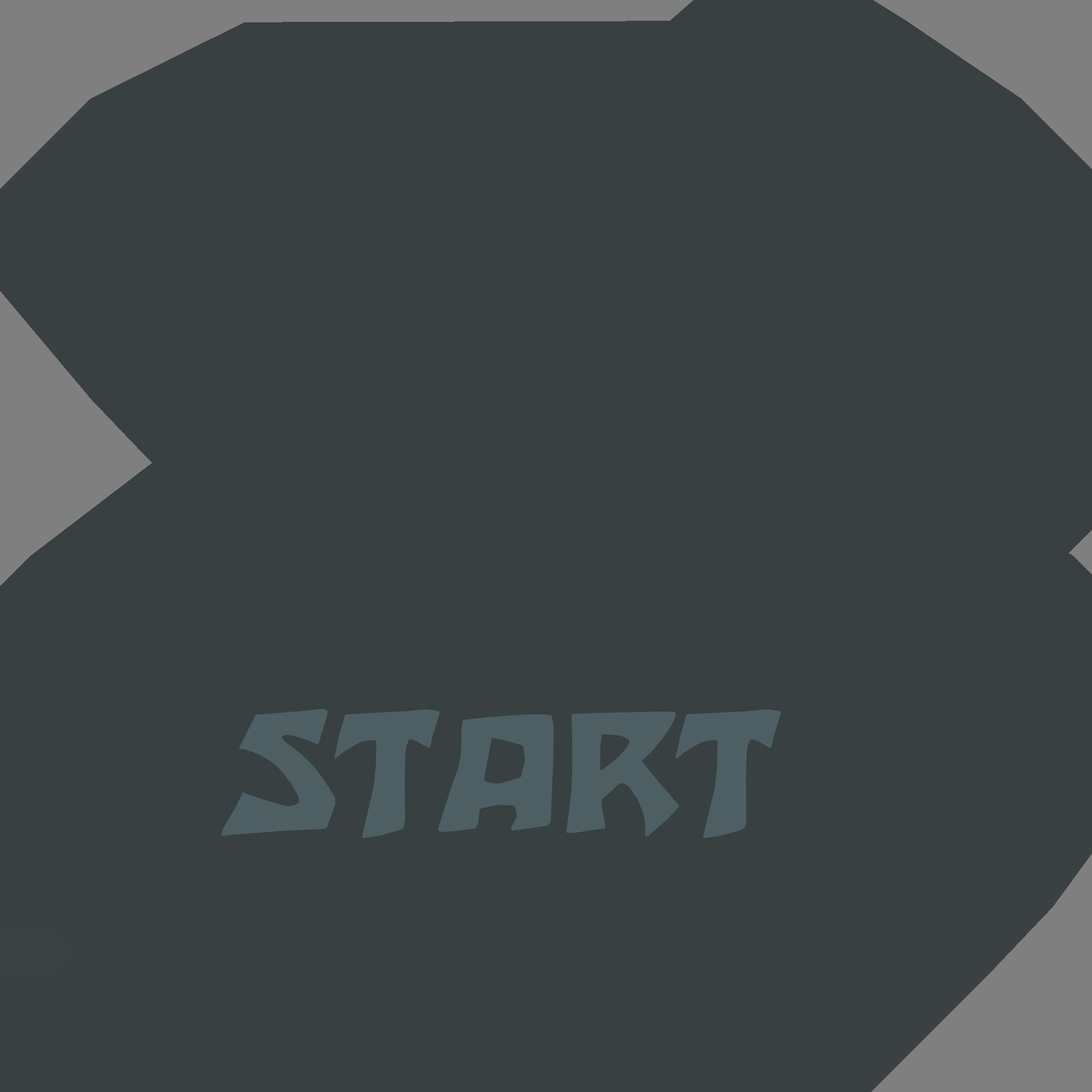
<style>
.page{position:relative;width:1092px;height:1092px;background:#394042}
.page>*{position:absolute;margin:0}
.t1{font:160px "Tarzan";color:#4e5f64}
</style>
<div class="page">
<p class="t1" style="left:221px;top:709px;width:560px;height:129px">START</p>
</div>
